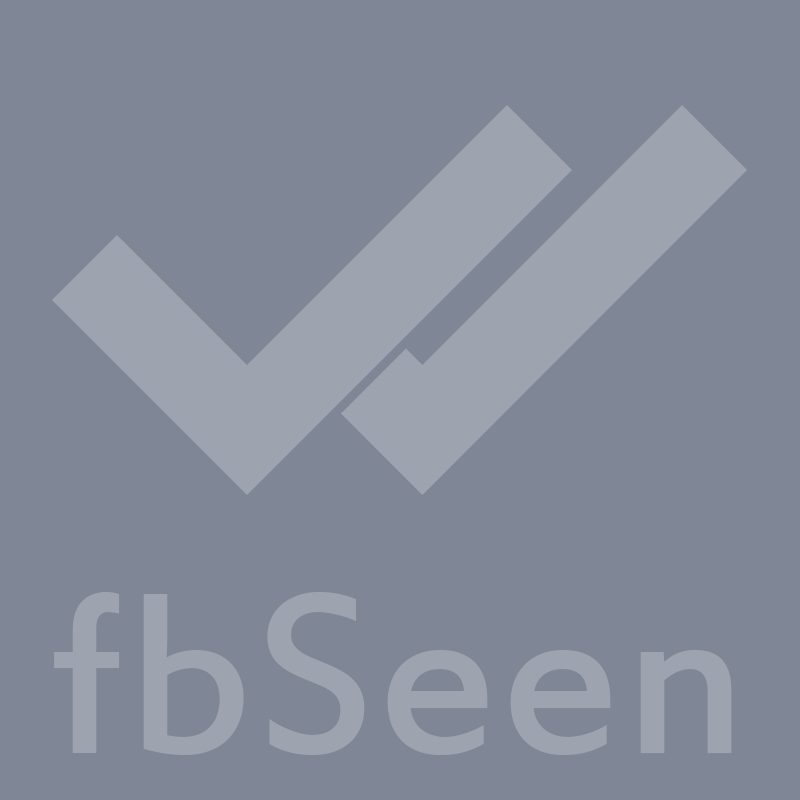
<style>
.page{position:relative;width:800px;height:800px;background:#7f8796}
.page>*{position:absolute;margin:0}
.t1{font:251.4px "EstrangeloEdessa";color:#9ea4af}
</style>
<div class="page">
<p class="t1" style="left:54px;top:592px;width:678px;height:163px">fbSeen</p>
</div>
